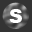
<style>
.page{position:relative;width:32px;height:32px;background:#333333}
.page>*{position:absolute;margin:0}
.t1{font:18.8px "Arial-Black";color:#ffffff}
</style>
<div class="page">
<p class="t1" style="left:9px;top:9px;width:13px;height:14px">S</p>
</div>
